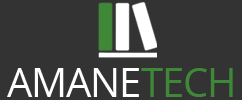
<style>
.page{position:relative;width:242px;height:100px;background:#333333}
.page>*{position:absolute;margin:0}
.t1{font:40px "OpenSans-Regular";letter-spacing:-0.028em;color:#ffffff;text-transform:uppercase}
.t2{font:40px "OpenSans-Regular";letter-spacing:-0.028em;color:#3e8838;text-transform:uppercase}
</style>
<div class="page">
<p class="t1" style="left:7px;top:68px;width:226px;height:29px">AMANE<span class="t2">TECH</span></p>
</div>
